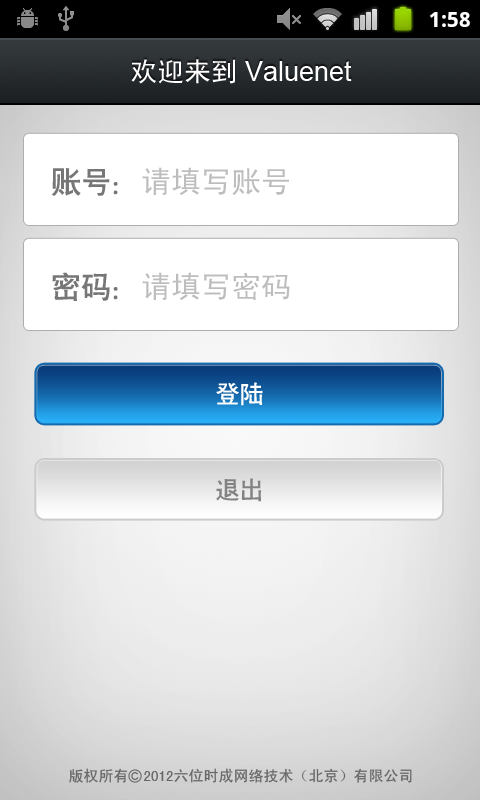
<style>
.page{position:relative;width:480px;height:800px}
.page>*{position:absolute;margin:0}
.t1{font:27px "ArialMT";color:#ffffff}
.t2{font:27px "SimHei";color:#ffffff}
.t3{font:30px "SimHei";color:#bebdbd}
.t4{font:30px "CTCuHeiSJ";color:#767676}
.t5{font:24px "CTCuHeiSJ";color:#ffffff}
.t6{font:24px "CTCuHeiSJ";color:#828282}
.t7{font:15px "SimHei";color:#676767}
</style>
<div class="page">
<p class="t1" style="left:131px;top:59px;width:221px;height:25px"><span class="t2">欢迎来到</span>Valuenet</p>
<p class="t3" style="left:51px;top:167px;width:238px;height:29px"><span class="t4">账号：</span>请填写账号</p>
<p class="t3" style="left:52px;top:272px;width:238px;height:29px"><span class="t4">密码：</span>请填写密码</p>
<p class="t5" style="left:216px;top:382px;width:47px;height:24px">登陆</p>
<p class="t6" style="left:216px;top:478px;width:46px;height:24px">退出</p>
<p class="t7" style="left:69px;top:768px;width:343px;height:15px">版权所有  2012六位时成网络技术（北京）有限公司</p>
</div>
